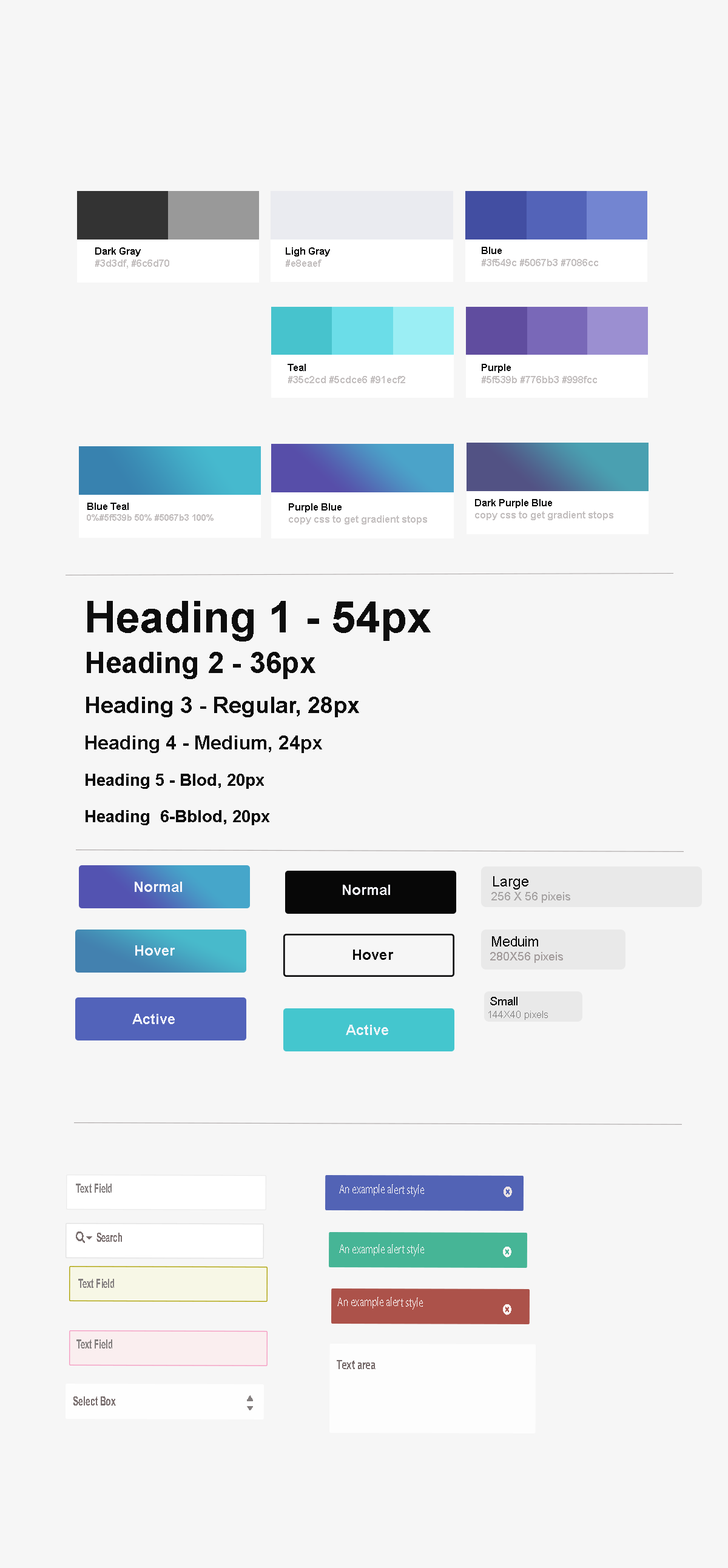
<style>
.page{position:relative;width:728px;height:1568px;background:#f6f6f6}
.page>*{position:absolute;margin:0}
.t1{font:9.7px "Arial-BoldMT";color:#c3bfbf}
.t2{font:9.7px "Arial-BoldMT";color:#020202}
.t3{font:7.3px "Arial-BoldMT";color:#080809}
.t4{font:7.3px "Arial-BoldMT";color:#c3bfbf}
.t5{font:8.9px "Arial-BoldMT";color:#c3bfbf}
.t6{font:7.3px "Arial-BoldMT";color:#0b0b0b}
.t7{font:16.2px/36.4px "Arial-BoldMT";color:#0d0d0d}
.t8{font:43.7px/40.4px "Arial-BoldMT";color:#0d0d0d}
.t9{font:29.1px/40.4px "Arial-BoldMT";color:#0d0d0d}
.t10{font:22.6px/40.4px "Arial-BoldMT";color:#0d0d0d}
.t11{font:19.4px/36.4px "Arial-BoldMT";color:#0d0d0d}
.t12{font:14.6px "Arial-BoldMT";color:#f3f4fa}
.t13{font:11.3px "ArialMT";color:#a7a4a4}
.t14{font:14.6px "ArialMT";color:#050505}
.t15{font:11.3px "ArialMT";color:#a39c9c}
.t16{font:13.7px "ArialMT";color:#090909}
.t17{font:14.6px "Arial-BoldMT";color:#090909}
.t18{font:10.5px "ArialMT";color:#797878}
.t19{font:11.3px "ArialMT";color:#0d0d0d}
.t20{font:14.6px "Arial-BoldMT";color:#f4f5f9}
.t21{font:12.9px "ArialNarrow-Bold";color:#847f7f;scale:0.74 1}
.t22{font:12.9px "MyriadPro-Regular";color:#faf6f6;scale:0.73 1}
.t23{font:12.9px "ArialNarrow-Bold";color:#796e6e;scale:0.73 1}
.t24{font:13.9px "FontAwesome";color:#080808;scale:0.73 1}
.t25{font:12.9px "ArialNarrow-Bold";color:#847f7f;scale:0.73 1}
.t26{font:12.7px "ArialNarrow-Bold";color:#847f7f;scale:0.74 1}
.t27{font:13.9px "MyriadPro-Semibold";color:#766a6a;scale:0.73 1}
.t28{font:12.9px "ArialNarrow-Bold";color:#796e6e;scale:0.78 1}
</style>
<div class="page">
<p class="t1" style="left:95px;top:247px;width:74px;height:22px"><span class="t2">Dark Gray<br></span>#3d3df, #6c6d70</p>
<p class="t3" style="left:286px;top:247px;width:44px;height:20px">Ligh Gray<br><span class="t4">#e8eaef</span></p>
<p class="t4" style="left:481px;top:247px;width:117px;height:19px"><span class="t3">Blue<br></span>#3f549c #5067b3 #7086cc</p>
<p class="t4" style="left:287px;top:364px;width:118px;height:19px"><span class="t3">Teal<br></span>#35c2cd #5cdce6 #91ecf2</p>
<p class="t4" style="left:481px;top:364px;width:116px;height:19px"><span class="t3">Purple <br></span>#5f539b #776bb3 #998fcc<br><span class="t3"> <br><br>####<br>##<br>##</span></p>
<p class="t5" style="left:87px;top:503px;width:126px;height:18px"><span class="t3">Blue Teal<br></span>0%#5f539b 50% #5067b3 100%  #35c2CD</p>
<p class="t4" style="left:289px;top:503px;width:138px;height:21px"><span class="t3">Purple Blue <br></span>copy css to get gradient stops</p>
<p class="t4" style="left:475px;top:499px;width:138px;height:21px"><span class="t6">Dark Purple Blue <br></span>copy css to get gradient stops</p>
<p class="t7" style="left:85px;top:601px;width:346px;height:224px"><span class="t8">Heading 1 - 54px<br></span><span class="t9">Heading 2 - 36px<br></span><span class="t10">Heading 3 - Regular, 28px<br></span><span class="t11">Heading 4 - Medium, 24px<br></span>Heading 5 - Blod, 20px<br>Heading  6-Bblod, 20px</p>
<p class="t12" style="left:135px;top:882px;width:47px;height:10px">Normal</p>
<p class="t13" style="left:491px;top:876px;width:79px;height:27px"><span class="t14">Large <br></span>256 X 56 pixeis<br><span class="t14"><br>h</span></p>
<p class="t12" style="left:343px;top:885px;width:47px;height:10px">Normal</p>
<p class="t15" style="left:490px;top:936px;width:73px;height:27px"><span class="t16">Meduim <br></span>280X56 pixeis</p>
<p class="t12" style="left:135px;top:945px;width:40px;height:11px">Hover</p>
<p class="t17" style="left:353px;top:950px;width:40px;height:10px">Hover</p>
<p class="t18" style="left:488px;top:997px;width:60px;height:23px"><span class="t19">Small<br></span>144X40 pixels</p>
<p class="t12" style="left:132px;top:1014px;width:43px;height:10px">Active</p>
<p class="t20" style="left:346px;top:1025px;width:42px;height:10px">Active</p>
<p class="t21" style="left:76px;top:1184px;width:36px;height:9px">Text Field</p>
<p class="t22" style="left:339px;top:1184px;width:85px;height:13px">An example alert style</p>
<p class="t23" style="left:96px;top:1233px;width:26px;height:9px"><span class="t24">   </span>Search</p>
<p class="t22" style="left:339px;top:1244px;width:85px;height:12px">An example alert style</p>
<p class="t25" style="left:78px;top:1279px;width:36px;height:9px">Text Field</p>
<p class="t22" style="left:337px;top:1297px;width:86px;height:13px">An example alert style</p>
<p class="t26" style="left:76px;top:1339px;width:36px;height:10px">Text Field</p>
<p class="t27" style="left:337px;top:1360px;width:38px;height:9px">Text area</p>
<p class="t28" style="left:73px;top:1396px;width:43px;height:10px">Select Box</p>
</div>
